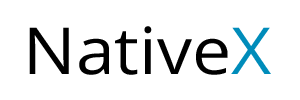
<style>
.page{position:relative;width:300px;height:100px;background:#ffffff}
.page>*{position:absolute;margin:0}
.t1{font:64.8px "OpenSans-Regular";color:#000000;scale:1.08 1}
.t2{font:64.8px "OpenSans-Regular";color:#008cba;scale:1.08 1}
</style>
<div class="page">
<p class="t1" style="left:29px;top:26px;width:242px;height:49px">Native<span class="t2">X</span></p>
</div>
